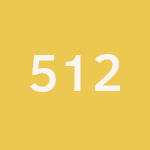
<style>
.page{position:relative;width:150px;height:150px;background:#edc850}
.page>*{position:absolute;margin:0}
.t1{font:52.9px "ClearSans-Medium";color:#f9f6f2}
</style>
<div class="page">
<p class="t1" style="left:30px;top:54px;width:90px;height:38px">512</p>
</div>
